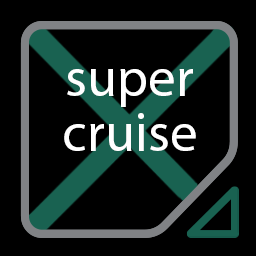
<style>
.page{position:relative;width:256px;height:256px;background:#000000}
.page>*{position:absolute;margin:0}
.t1{font:55px/55px "MyriadPro-Regular";color:#ffffff}
</style>
<div class="page">
<p class="t1" style="left:64px;top:69px;width:132px;height:82px;text-align:center">super<br>cruise</p>
</div>
